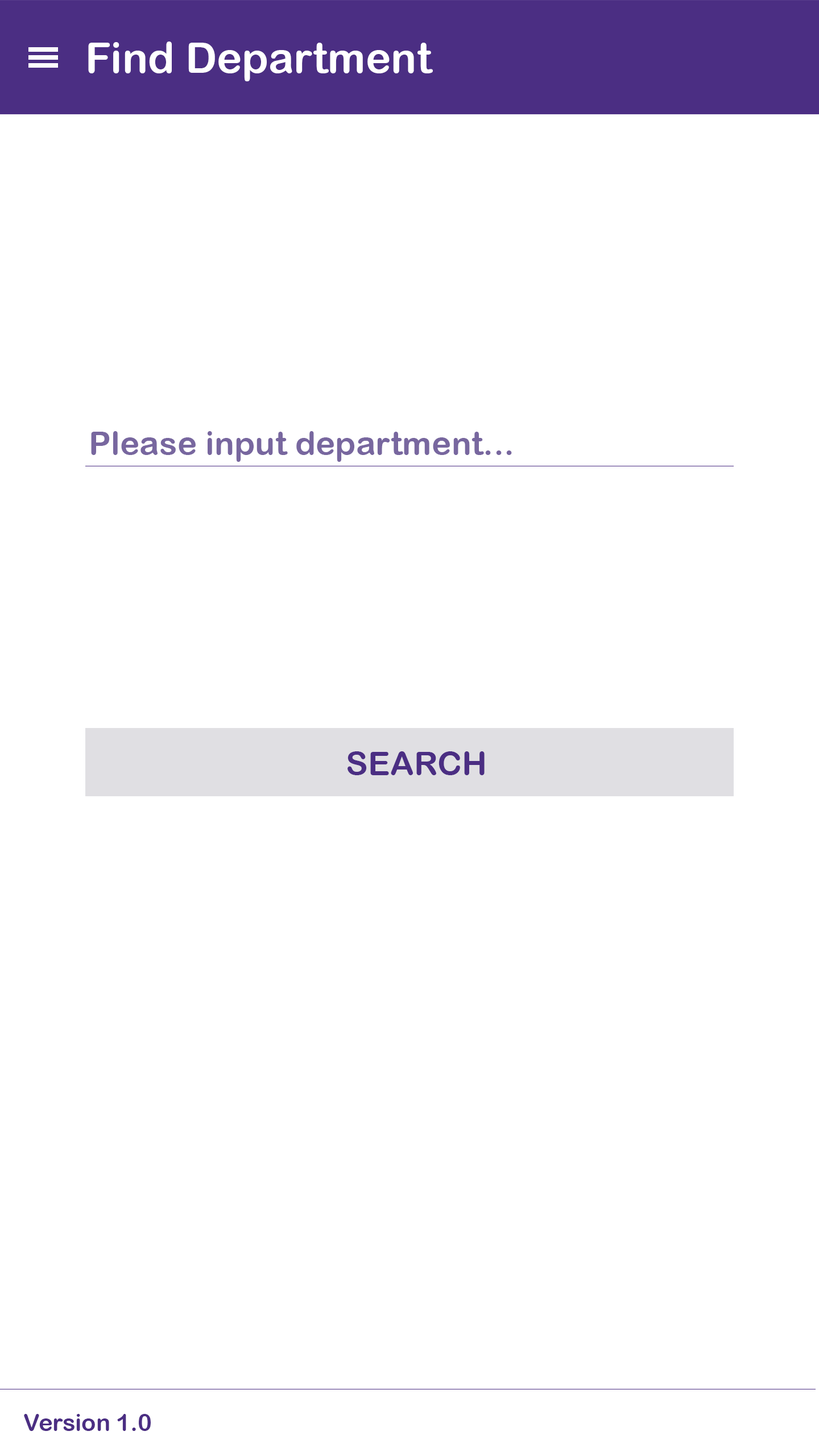
<style>
.page{position:relative;width:819px;height:1456px;background:#ffffff}
.page>*{position:absolute;margin:0}
.t1{font:42.7px "ArialRoundedMTBold";color:#ffffff}
.t2{font:33.2px "ArialRoundedMTBold";color:#78679f}
.t3{font:33.2px "ArialRoundedMTBold";color:#4b2e83}
.t4{font:23.7px "ArialRoundedMTBold";color:#4b2e83}
</style>
<div class="page">
<p class="t1" style="left:88px;top:42px;width:345px;height:39px">Find Department</p>
<p class="t2" style="left:91px;top:431px;width:421px;height:31px">Please input department...</p>
<p class="t3" style="left:348px;top:751px;width:137px;height:24px">SEARCH</p>
<p class="t4" style="left:24px;top:1414px;width:127px;height:17px">Version 1.0</p>
</div>
